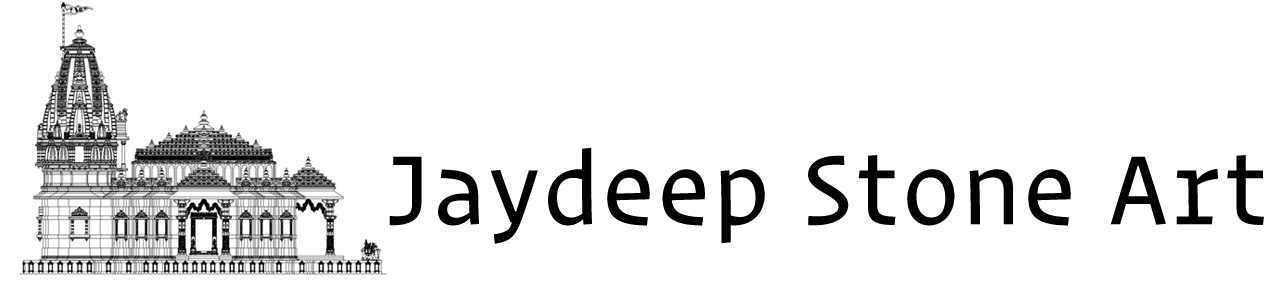
<style>
.page{position:relative;width:1280px;height:291px;background:#ffffff}
.page>*{position:absolute;margin:0}
.t1{font:98.1px "OperatorSSm-Book";color:#000000}
</style>
<div class="page">
<p class="t1" style="left:389px;top:147px;width:875px;height:97px">Jaydeep Stone Art</p>
</div>
